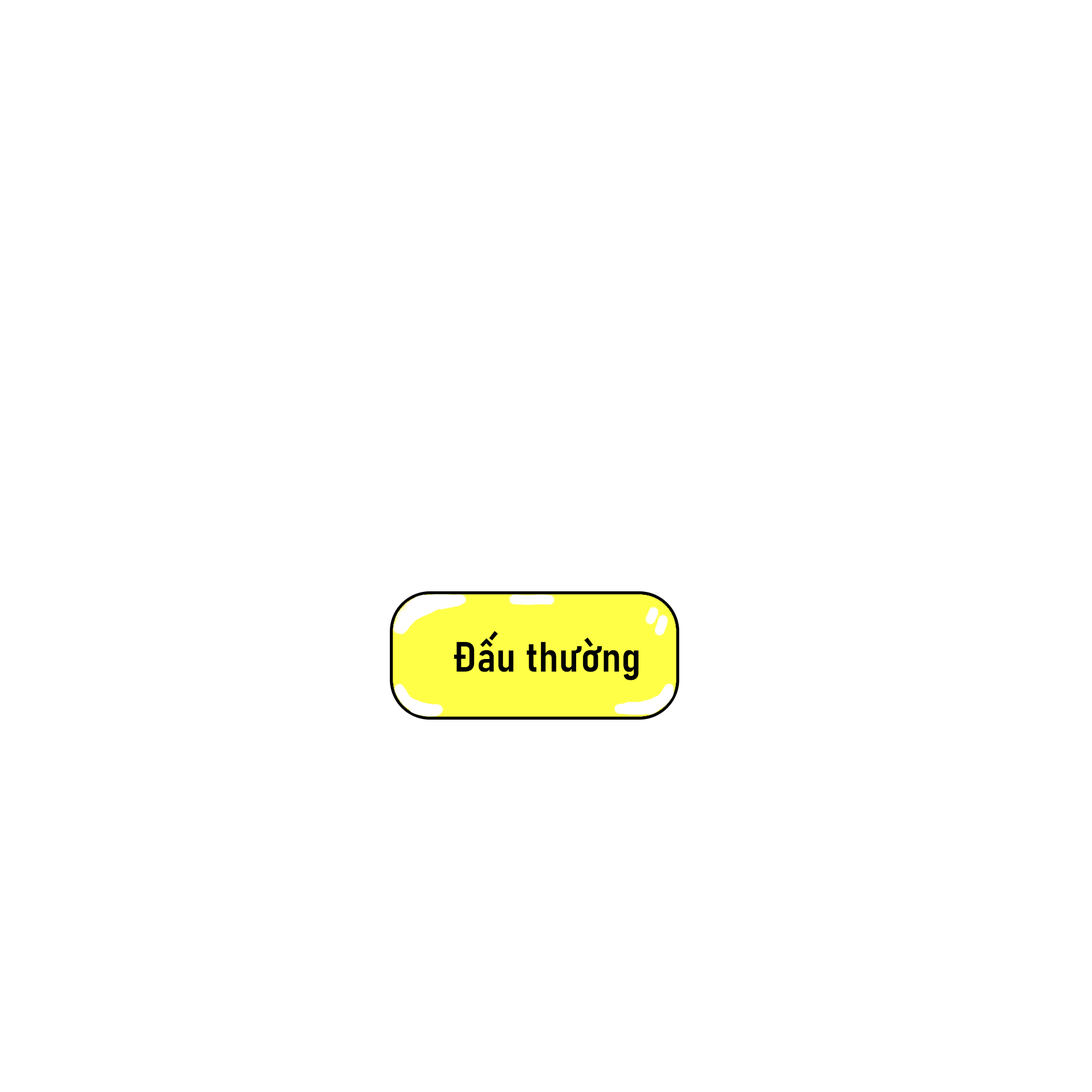
<style>
.page{position:relative;width:1092px;height:1092px;background:#ffffff}
.page>*{position:absolute;margin:0}
.t1{font:41.7px "Bahnschrift-SemiBoldSemiCondensed";color:#000000}
</style>
<div class="page">
<p class="t1" style="left:454px;top:631px;width:185px;height:49px">Đấu thường</p>
</div>
